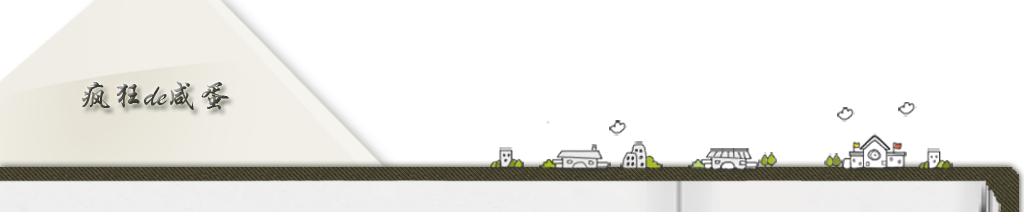
<style>
.page{position:relative;width:1024px;height:212px;background:#ffffff}
.page>*{position:absolute;margin:0}
.t1{font:32px "STXingkai"}
</style>
<div class="page">
<p class="t1" style="left:82px;top:81px;width:147px;height:29px">疯狂de咸蛋</p>
</div>
